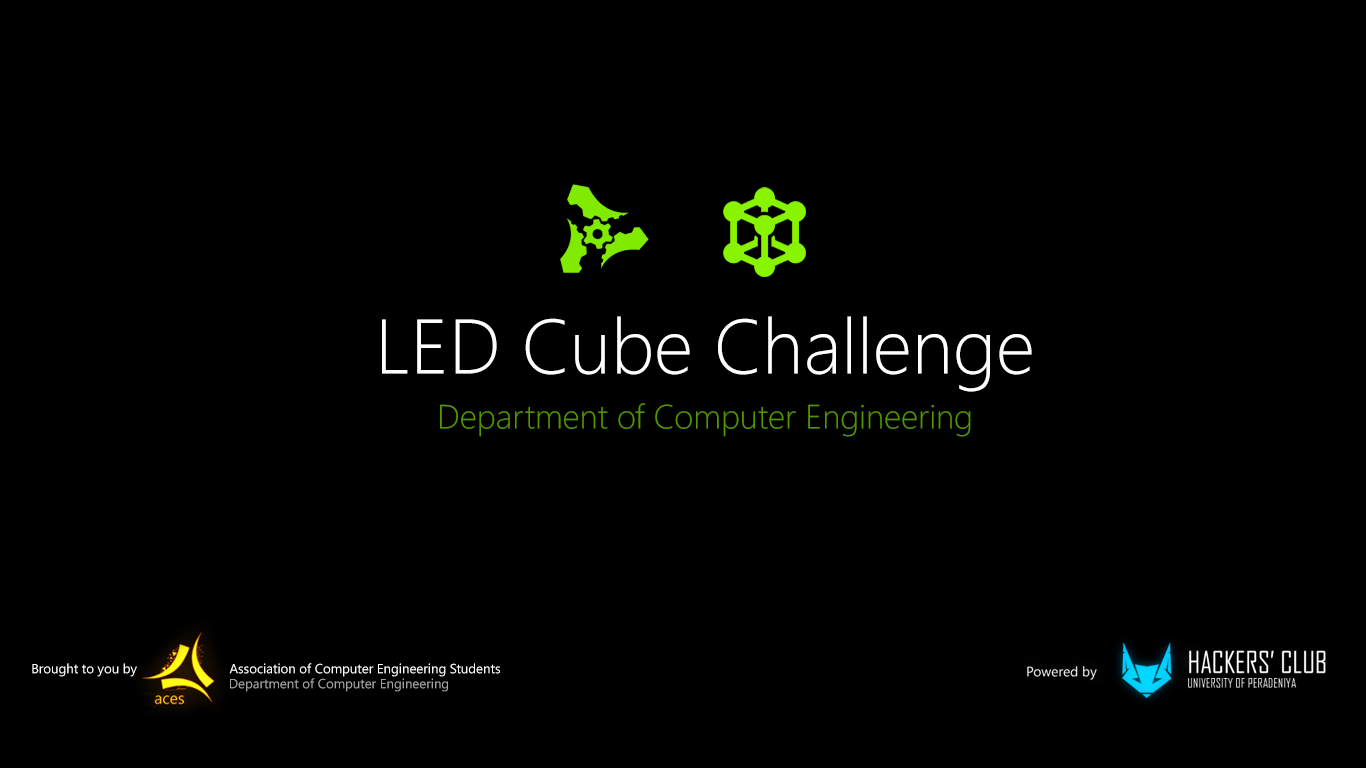
<style>
.page{position:relative;width:1366px;height:768px;background:#000000}
.page>*{position:absolute;margin:0}
.t1{font:76.9px "SegoeUI-Light";color:#ffffff}
.t2{font:33.7px "SegoeUI-Light";color:#599f00}
.t3{font:13.2px "SegoeUI";color:#ffffff}
.t4{font:13.2px "SegoeUI";color:#a3a3a3}
</style>
<div class="page">
<p class="t1" style="left:382px;top:316px;width:650px;height:76px">LED Cube Challenge</p>
<p class="t2" style="left:440px;top:403px;width:531px;height:34px;opacity:0.9">Department of Computer Engineering</p>
<p class="t3" style="left:32px;top:663px;width:105px;height:14px">Brought to you by</p>
<p class="t3" style="left:229px;top:663px;width:271px;height:14px">Association of Computer Engineering Students</p>
<p class="t4" style="left:230px;top:678px;width:218px;height:14px">Department of Computer Engineering</p>
</div>
